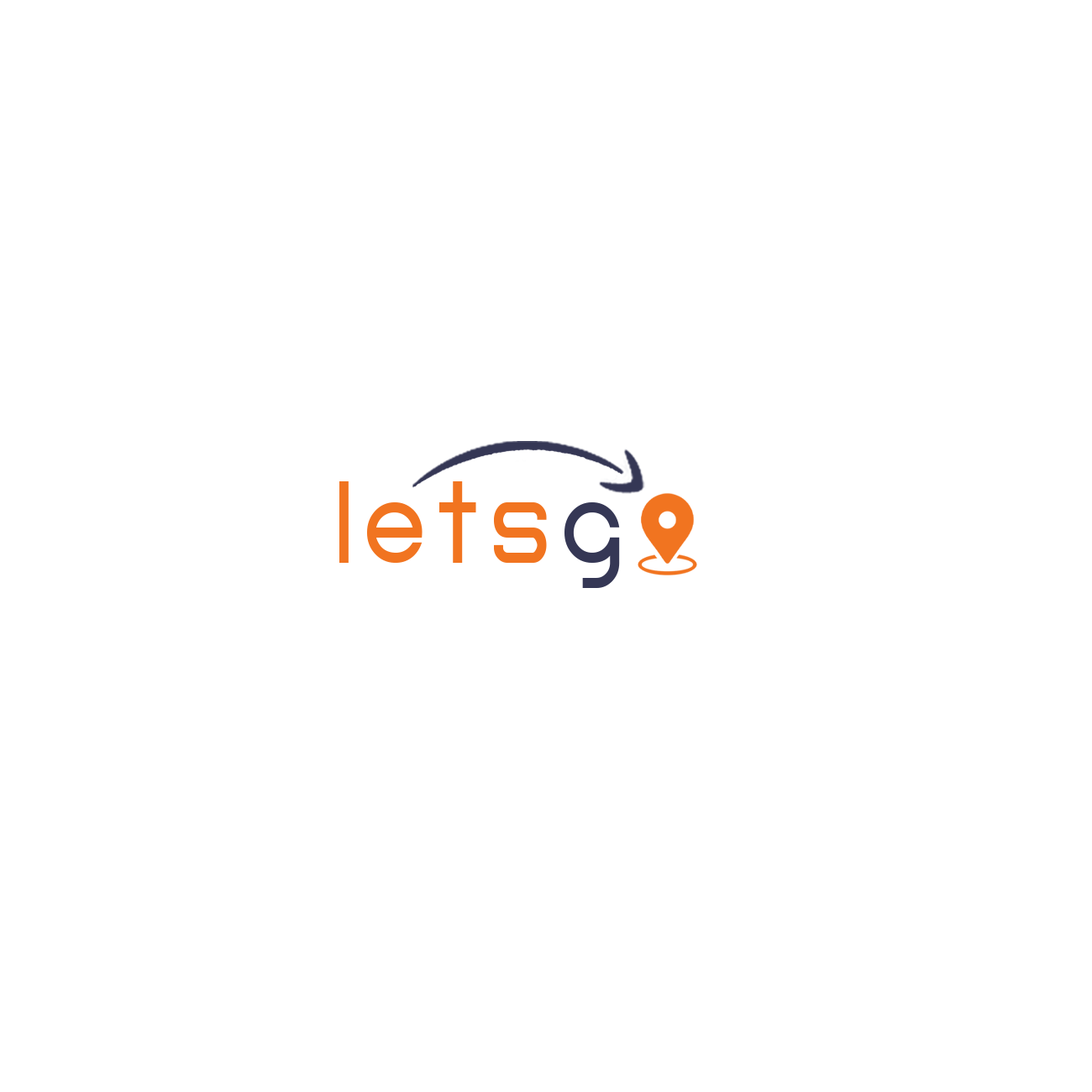
<style>
.page{position:relative;width:1092px;height:1092px;background:#ffffff}
.page>*{position:absolute;margin:0}
.t1{font:106.4px "BayerSans";letter-spacing:0.14em;color:#f17420;scale:0.9 1}
.t2{font:106.4px "BayerSans";letter-spacing:0.14em;color:#353755;scale:0.9 1}
</style>
<div class="page">
<p class="t1" style="left:339px;top:481px;width:281px;height:107px">lets<span class="t2">g</span></p>
</div>
